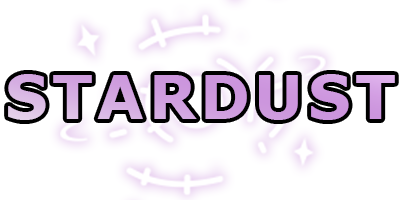
<style>
.page{position:relative;width:400px;height:200px;background:#ffffff}
.page>*{position:absolute;margin:0}
.t1{font:60px "Verdana-Bold";letter-spacing:0.075em;color:#cc95dd}
</style>
<div class="page">
<p class="t1" style="left:8px;top:74px;width:387px;height:46px">STARDUST</p>
</div>
